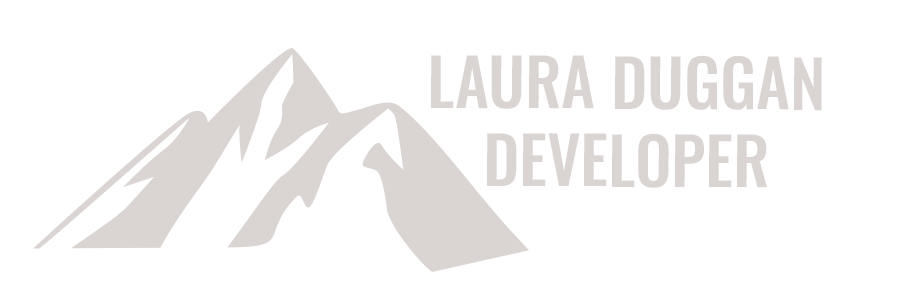
<style>
.page{position:relative;width:898px;height:300px;background:#ffffff}
.page>*{position:absolute;margin:0}
.t1{font:64.9px "Oswald-Medium";color:#dad5d2}
</style>
<div class="page">
<p class="t1" style="left:431px;top:55px;width:391px;height:133px;text-align:center">LAURA DUGGAN DEVELOPER</p>
</div>
